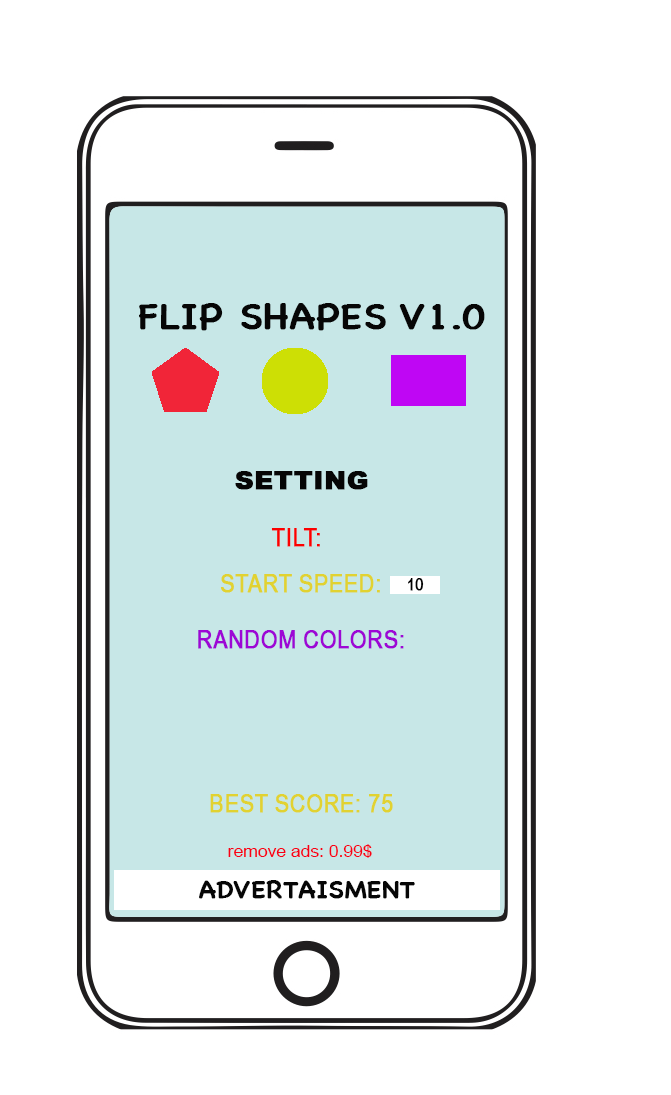
<style>
.page{position:relative;width:671px;height:1095px;background:#ffffff}
.page>*{position:absolute;margin:0}
.t1{font:37.5px "ChalkboardSE-Regular";color:#060606;text-transform:uppercase;font-weight:bold;scale:1.05 1}
.t2{font:12px "Arial-Black";color:#060606;text-transform:uppercase;font-weight:bold;scale:1.05 1}
.t3{font:12px "ArialNarrow";color:#fc0000;text-transform:uppercase;font-weight:bold;scale:1.05 1}
.t4{font:12px/56.3px "ArialNarrow";color:#9d07d5;text-transform:uppercase;font-weight:bold;scale:1.05 1}
.t5{font:12px/56.3px "ArialNarrow";color:#e1d231;text-transform:uppercase;font-weight:bold;scale:1.05 1}
.t6{font:16.7px "ArialNarrow";color:#000000;text-transform:uppercase;font-weight:bold;scale:1.05 1}
.t7{font:12px "ArialNarrow";color:#e1d231;text-transform:uppercase;font-weight:bold;scale:1.05 1}
.t8{font:16.7px "ArialMT";color:#f80017;scale:1.05 1}
.t9{font:25px "ChalkboardSE-Regular";color:#060606;text-transform:uppercase;font-weight:bold;scale:1.05 1}
</style>
<div class="page">
<p class="t1" style="left:139px;top:303px;width:346px;height:28px">Flip SHapes v1.0</p>
<p class="t2" style="left:235px;top:471px;width:133px;height:19px">SETTING</p>
<p class="t3" style="left:271px;top:528px;width:49px;height:19px">TILT:</p>
<p class="t4" style="left:198px;top:574px;width:206px;height:75px;text-align:center"><span class="t5">Start Speed:<br></span>RANDOM COLORS:</p>
<p class="t6" style="left:408px;top:578px;width:16px;height:13px">10</p>
<p class="t7" style="left:210px;top:794px;width:183px;height:19px">BEST SCORE: 75</p>
<p class="t8" style="left:228px;top:844px;width:144px;height:14px">remove ads: 0.99$</p>
<p class="t9" style="left:199px;top:880px;width:216px;height:19px">ADVERTAISMENT</p>
</div>
